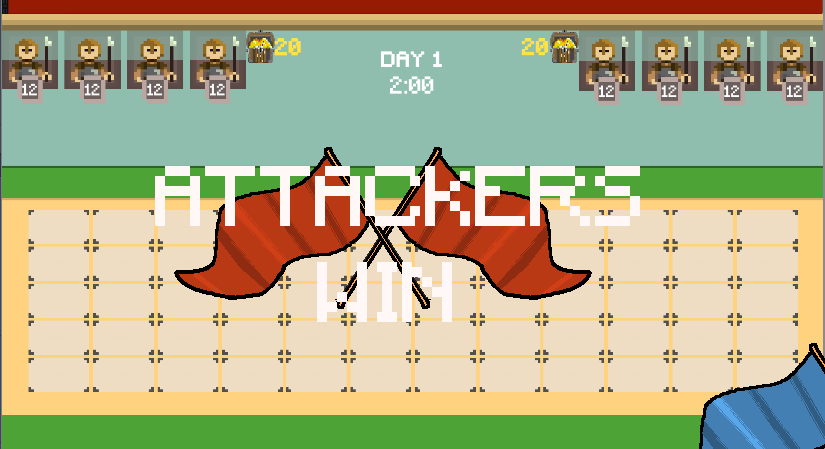
<style>
.page{position:relative;width:825px;height:449px;background:#eedcc3}
.page>*{position:absolute;margin:0}
.t1{font:80px "Minecraft";color:#fff8f6}
</style>
<div class="page">
<p class="t1" style="left:155px;top:166px;width:485px;height:156px;text-align:center">ATTACKERS<br> WIN</p>
</div>
